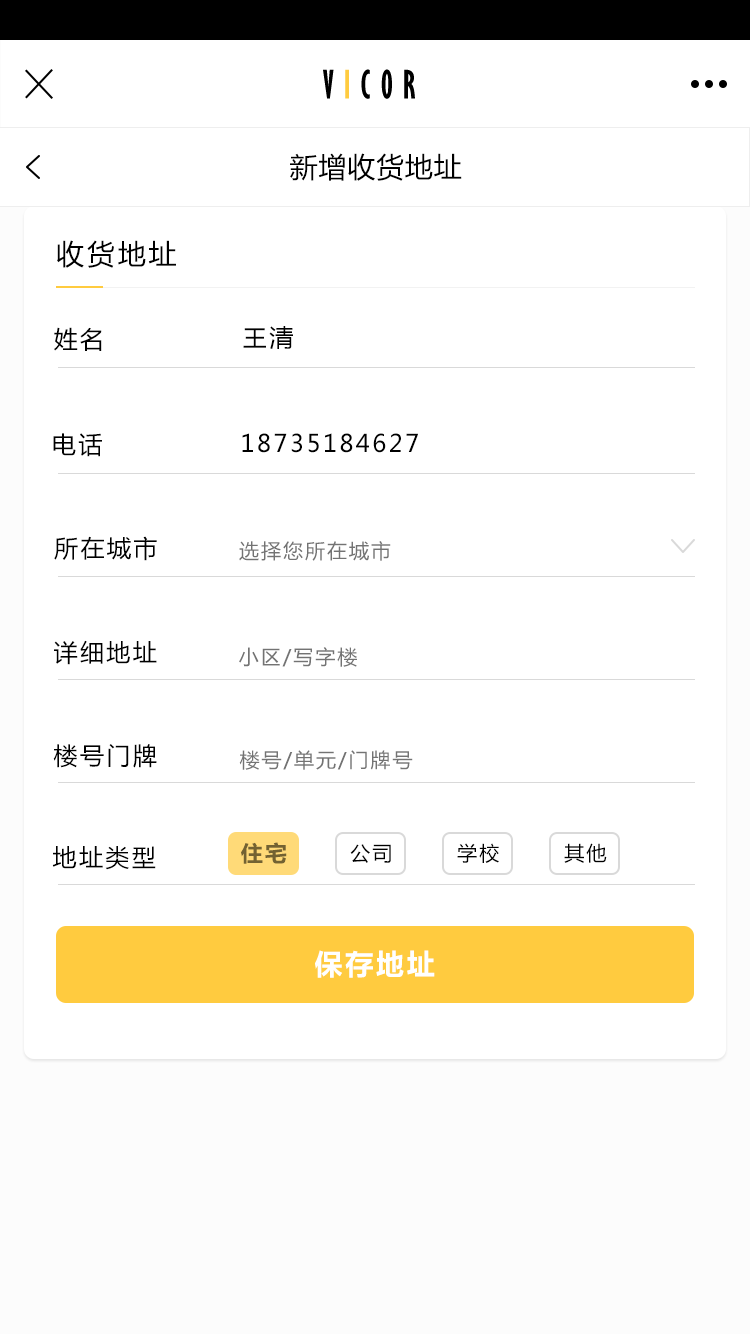
<style>
.page{position:relative;width:750px;height:1334px;background:#ffffff}
.page>*{position:absolute;margin:0}
.t1{font:36px "GillSansMT-ExtraCondensedBold";letter-spacing:0.3em;color:#000000;text-transform:uppercase}
.t2{font:36px "GillSansMT-ExtraCondensedBold";letter-spacing:0.3em;color:#ffcb3f;text-transform:uppercase}
.t3{font:28px "MicrosoftYaHei";letter-spacing:0.03em;color:#000000;text-transform:uppercase}
.t4{font:28px "MicrosoftYaHei";letter-spacing:0.1em;color:#000000;text-transform:uppercase}
.t5{font:24px "MicrosoftYaHei";letter-spacing:0.1em;color:#000000;text-transform:uppercase}
.t6{font:20px "MicrosoftYaHei";letter-spacing:0.1em;color:#737373;text-transform:uppercase}
.t7{font:22px "MicrosoftYaHei-Bold";letter-spacing:0.1em;color:#736232;text-transform:uppercase}
.t8{font:20px "MicrosoftYaHei";letter-spacing:0.1em;color:#000000;text-transform:uppercase}
.t9{font:28px "MicrosoftYaHei-Bold";letter-spacing:0.1em;color:#ffffff;text-transform:uppercase}
</style>
<div class="page">
<p class="t1" style="left:323px;top:69px;width:92px;height:30px">v<span class="t2">i</span>cor</p>
<p class="t3" style="left:290px;top:153px;width:172px;height:28px">新增收货地址</p>
<p class="t4" style="left:57px;top:240px;width:119px;height:28px">收货地址</p>
<p class="t5" style="left:54px;top:327px;width:48px;height:24px">姓名</p>
<p class="t5" style="left:243px;top:326px;width:50px;height:23px">王清</p>
<p class="t5" style="left:53px;top:433px;width:49px;height:24px">电话</p>
<p class="t5" style="left:242px;top:433px;width:176px;height:20px">18735184627</p>
<p class="t5" style="left:54px;top:536px;width:103px;height:25px">所在城市</p>
<p class="t6" style="left:239px;top:541px;width:152px;height:20px">选择您所在城市</p>
<p class="t5" style="left:54px;top:640px;width:103px;height:25px">详细地址</p>
<p class="t6" style="left:239px;top:647px;width:118px;height:20px">小区/写字楼</p>
<p class="t5" style="left:53px;top:744px;width:104px;height:24px">楼号门牌</p>
<p class="t6" style="left:239px;top:750px;width:174px;height:20px">楼号/单元/门牌号</p>
<p class="t5" style="left:52px;top:846px;width:104px;height:24px">地址类型</p>
<p class="t7" style="left:241px;top:842px;width:46px;height:22px">住宅</p>
<p class="t8" style="left:350px;top:844px;width:41px;height:19px">公司</p>
<p class="t8" style="left:457px;top:843px;width:42px;height:20px">学校</p>
<p class="t8" style="left:564px;top:843px;width:43px;height:20px">其他</p>
<p class="t9" style="left:315px;top:950px;width:120px;height:28px">保存地址</p>
</div>
